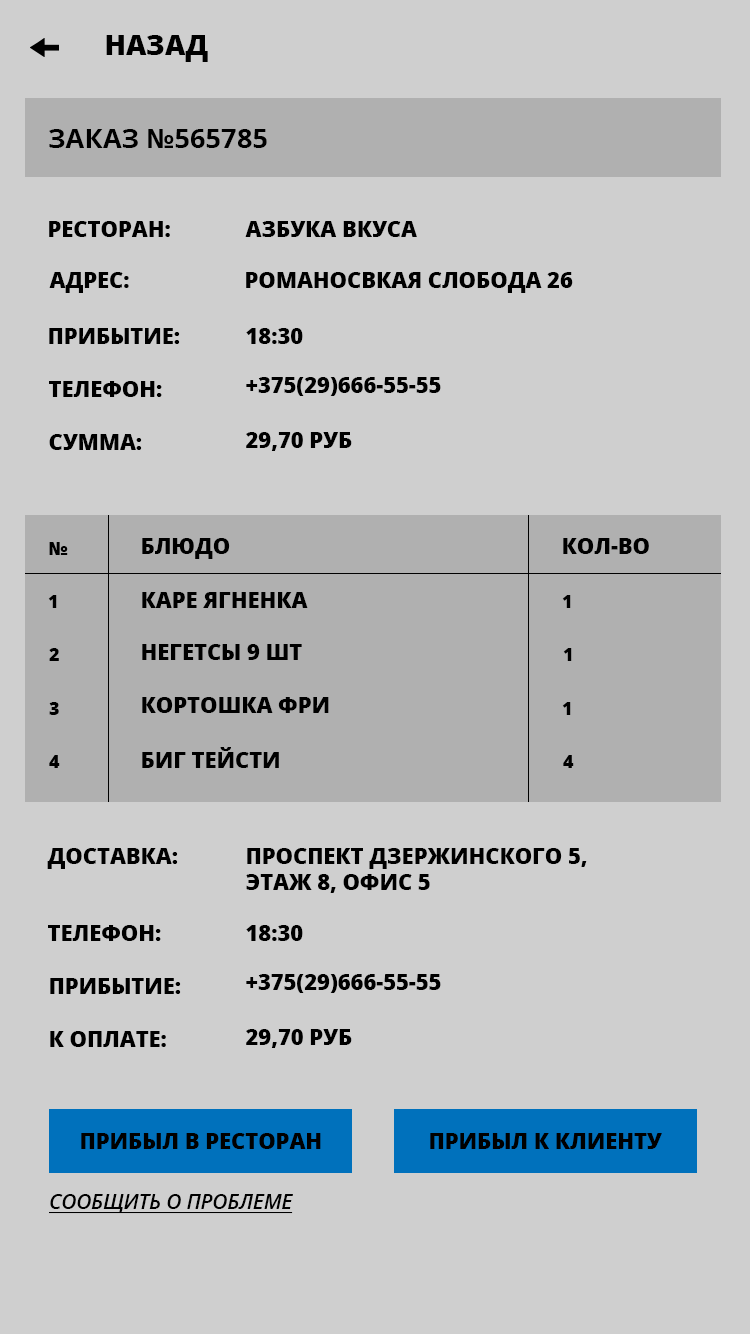
<style>
.page{position:relative;width:750px;height:1334px;background:#cfcfcf}
.page>*{position:absolute;margin:0}
.t1{font:28.1px "OpenSans-Extrabold";color:#000000;text-transform:uppercase}
.t2{font:27.3px "OpenSans-Bold";color:#000000;text-transform:uppercase}
.t3{font:21.9px "OpenSans-Extrabold";color:#000000;text-transform:uppercase}
.t4{font:18.1px "OpenSans-Extrabold";color:#000000;text-transform:uppercase}
.t5{font:18px "OpenSans-Extrabold";color:#000000;text-transform:uppercase}
.t6{font:20.6px "OpenSans-SemiboldItalic";color:#000000;text-transform:uppercase;text-decoration:underline}
</style>
<div class="page">
<p class="t1" style="left:106px;top:35px;width:102px;height:27px">назад</p>
<p class="t2" style="left:49px;top:129px;width:218px;height:19px">Заказ №565785</p>
<p class="t3" style="left:49px;top:221px;width:121px;height:16px">РЕСТОРАН:</p>
<p class="t3" style="left:245px;top:221px;width:172px;height:16px">аЗБУКА ВКУСА</p>
<p class="t3" style="left:49px;top:272px;width:80px;height:21px">аДРЕС:</p>
<p class="t3" style="left:246px;top:272px;width:327px;height:21px">РОМАНОСВКАЯ СЛОБОДА 26</p>
<p class="t3" style="left:49px;top:328px;width:131px;height:16px">ПРИБЫТИЕ:</p>
<p class="t3" style="left:246px;top:328px;width:57px;height:16px">18:30</p>
<p class="t3" style="left:246px;top:377px;width:195px;height:19px">+375(29)666-55-55</p>
<p class="t3" style="left:49px;top:381px;width:113px;height:16px">ТЕЛЕФОН:</p>
<p class="t3" style="left:49px;top:434px;width:93px;height:16px">СУММА:</p>
<p class="t3" style="left:246px;top:432px;width:106px;height:19px">29,70 РУБ</p>
<p class="t4" style="left:49px;top:542px;width:19px;height:13px">№</p>
<p class="t3" style="left:142px;top:538px;width:88px;height:21px">Блюдо</p>
<p class="t3" style="left:563px;top:538px;width:86px;height:16px">кол-во</p>
<p class="t3" style="left:142px;top:592px;width:166px;height:16px">каре ягненка</p>
<p class="t5" style="left:48px;top:595px;width:9px;height:13px">1</p>
<p class="t5" style="left:562px;top:595px;width:9px;height:13px">1</p>
<p class="t5" style="left:49px;top:648px;width:10px;height:13px">2</p>
<p class="t3" style="left:142px;top:644px;width:160px;height:16px">негетсы 9 шт</p>
<p class="t5" style="left:563px;top:648px;width:9px;height:13px">1</p>
<p class="t5" style="left:49px;top:702px;width:10px;height:13px">3</p>
<p class="t3" style="left:142px;top:697px;width:187px;height:16px">кортошка фри</p>
<p class="t5" style="left:562px;top:702px;width:9px;height:13px">1</p>
<p class="t3" style="left:142px;top:747px;width:137px;height:21px">биг тейсти</p>
<p class="t5" style="left:49px;top:755px;width:11px;height:13px">4</p>
<p class="t5" style="left:563px;top:755px;width:11px;height:13px">4</p>
<p class="t3" style="left:47px;top:848px;width:131px;height:21px">доставка:</p>
<p class="t3" style="left:246px;top:848px;width:341px;height:45px">проспект дзержинского 5,<br>этаж 8, офис 5</p>
<p class="t3" style="left:48px;top:925px;width:113px;height:16px">телефон:</p>
<p class="t3" style="left:246px;top:925px;width:57px;height:16px">18:30</p>
<p class="t3" style="left:246px;top:974px;width:195px;height:19px">+375(29)666-55-55</p>
<p class="t3" style="left:50px;top:978px;width:131px;height:16px">прибытие:</p>
<p class="t3" style="left:50px;top:1031px;width:116px;height:16px">к оплате:</p>
<p class="t3" style="left:246px;top:1029px;width:106px;height:19px">29,70 РУБ</p>
<p class="t3" style="left:81px;top:1133px;width:240px;height:16px">прибыл в ресторан</p>
<p class="t3" style="left:430px;top:1133px;width:232px;height:16px">прибыл к клиенту</p>
<p class="t6" style="left:49px;top:1194px;width:244px;height:20px">сообщить о проблеме</p>
</div>
